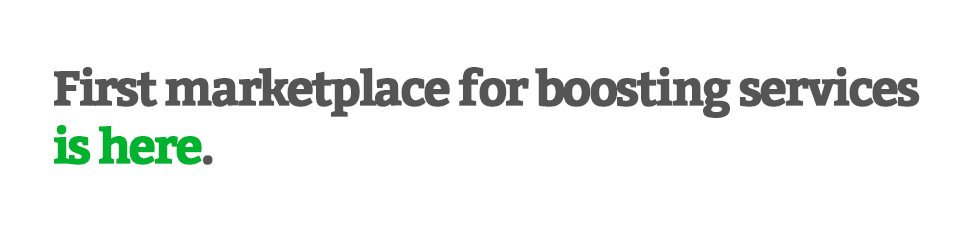
<style>
.page{position:relative;width:980px;height:233px;background:#ffffff}
.page>*{position:absolute;margin:0}
.t1{font:48px "Bitter-Bold";letter-spacing:-0.07em;color:#555555;font-weight:bold}
.t2{font:48px "Bitter-Bold";letter-spacing:-0.07em;color:#00b22d;font-weight:bold}
</style>
<div class="page">
<p class="t1" style="left:54px;top:67px;width:866px;height:98px">First marketplace for boosting services <br><span class="t2">is here</span>.</p>
</div>
